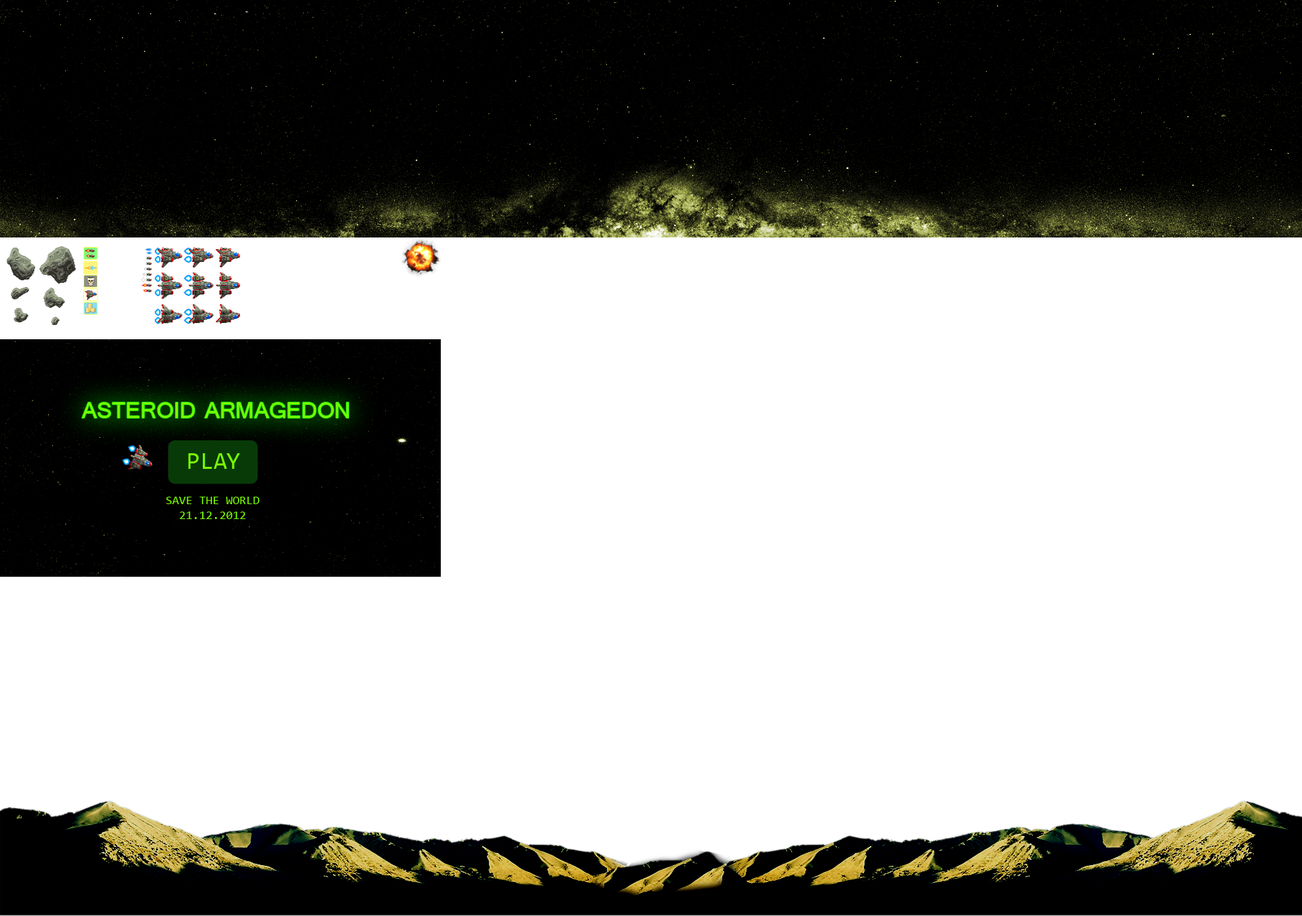
<style>
.page{position:relative;width:1302px;height:916px;background:#ffffff}
.page>*{position:absolute;margin:0}
.t1{font:28.5px "Tunga";color:#78ff00;text-transform:uppercase}
.t2{font:24.4px "Consolas";color:#78ff00}
.t3{font:12.2px "Consolas";color:#78ff00}
</style>
<div class="page">
<p class="t1" style="left:82px;top:402px;width:267px;height:16px">Asteroid Armagedon</p>
<p class="t2" style="left:188px;top:453px;width:52px;height:16px">PLAY</p>
<p class="t3" style="left:166px;top:496px;width:94px;height:23px;text-align:center">SAVE THE WORLD<br>21.12.2012</p>
</div>
